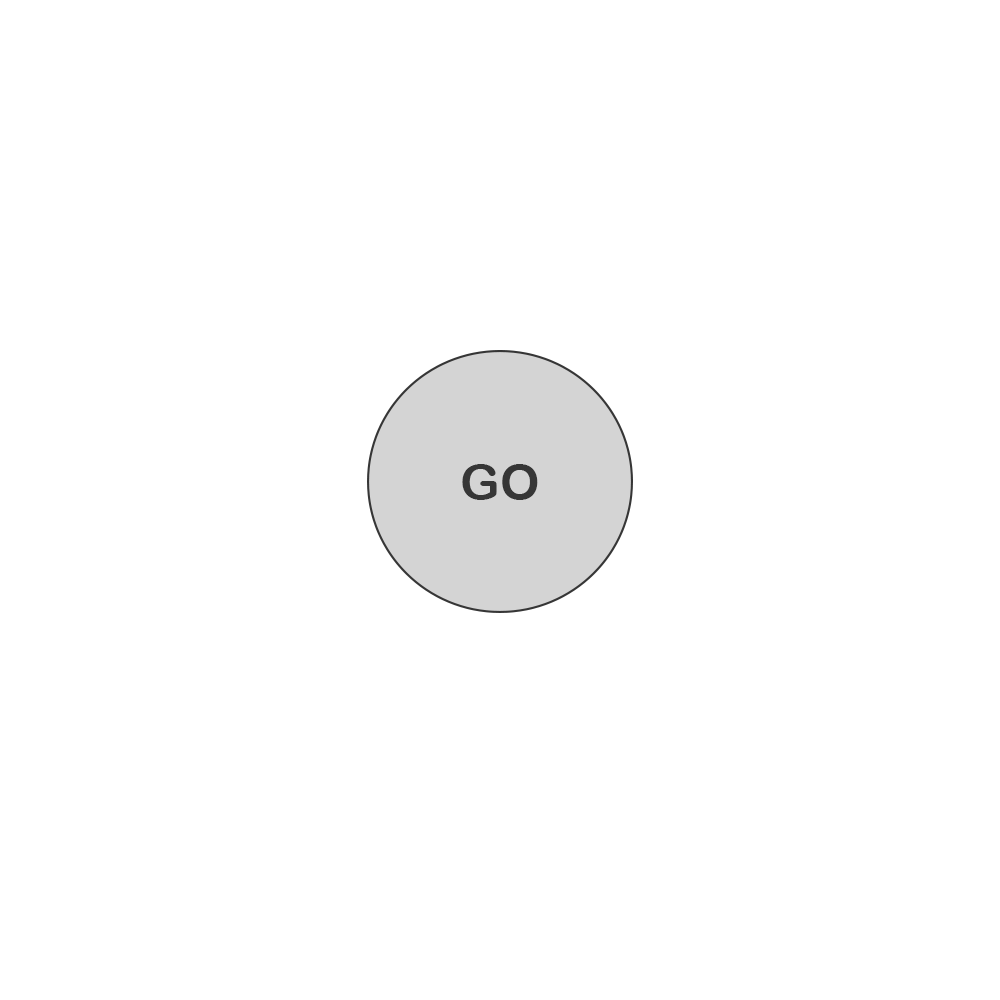
<style>
.page{position:relative;width:1000px;height:1000px;background:#ffffff}
.page>*{position:absolute;margin:0}
.t1{font:12px "ArialRoundedMTBold";color:#363636}
</style>
<div class="page">
<p class="t1" style="left:462px;top:464px;width:76px;height:36px">GO</p>
</div>
